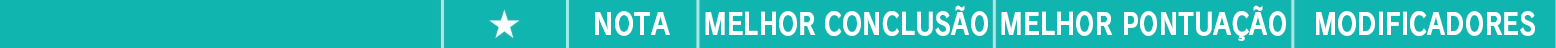
<style>
.page{position:relative;width:1556px;height:48px;background:#11b5af}
.page>*{position:absolute;margin:0}
.t1{font:29.3px "RodinPro-B";color:#ffffff;scale:0.84 1}
.t2{font:29.3px "RodinPro-B";color:#ffffff;scale:0.85 1}
.t3{font:29.3px "RodinPro-B";color:#ffffff;scale:0.88 1}
</style>
<div class="page">
<p class="t1" style="left:705px;top:5px;width:283px;height:31px">MELHOR CONCLUSÃO</p>
<p class="t2" style="left:1001px;top:5px;width:285px;height:36px">MELHOR PONTUAÇÃO</p>
<p class="t3" style="left:595px;top:11px;width:75px;height:25px">NOTA</p>
<p class="t1" style="left:1316px;top:11px;width:219px;height:25px">MODIFICADORES</p>
</div>
